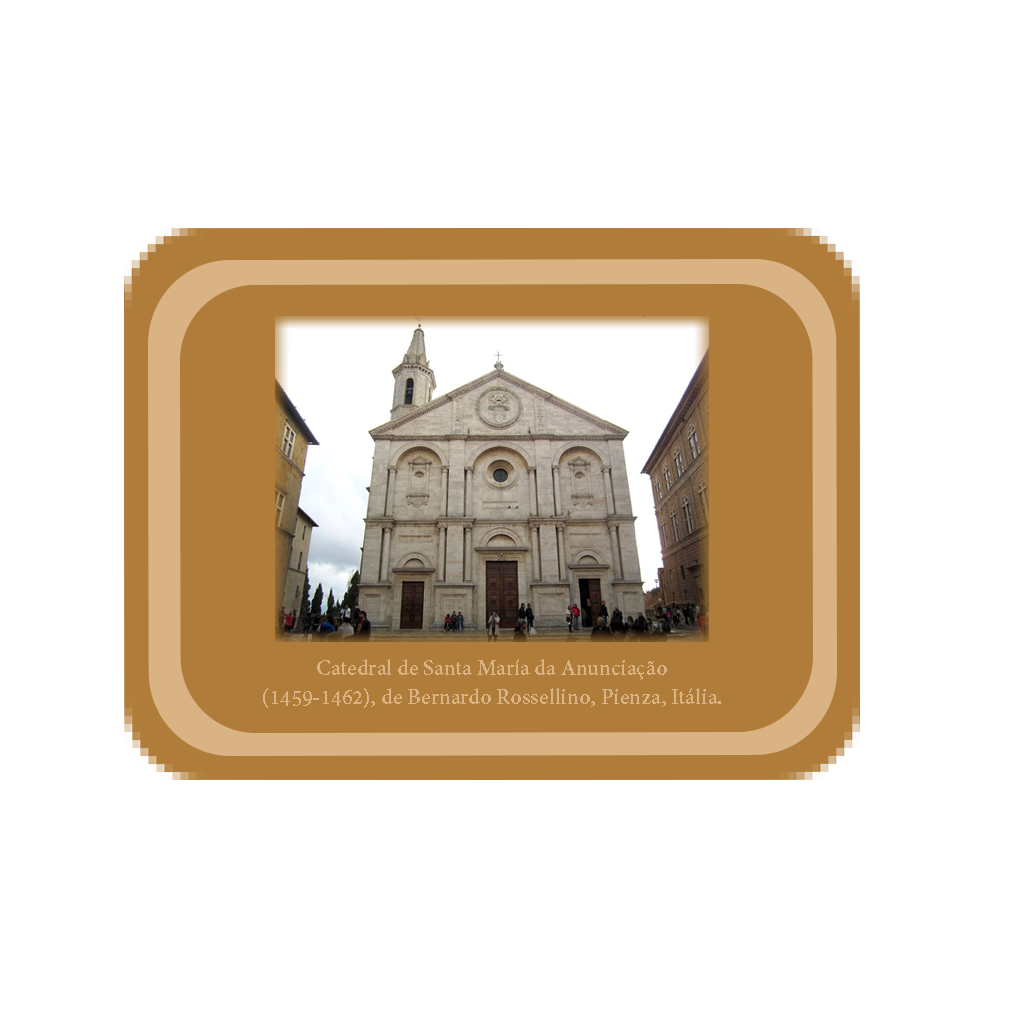
<style>
.page{position:relative;width:1024px;height:1024px;background:#ffffff}
.page>*{position:absolute;margin:0}
.t1{font:24.2px "AdobeDevanagari-Bold";color:#d9b383}
</style>
<div class="page">
<p class="t1" style="left:263px;top:659px;width:458px;height:49px;text-align:center">Catedral de Santa María da Anunciação (1459-1462), de Bernardo Rossellino, Pienza, Itália.</p>
</div>
